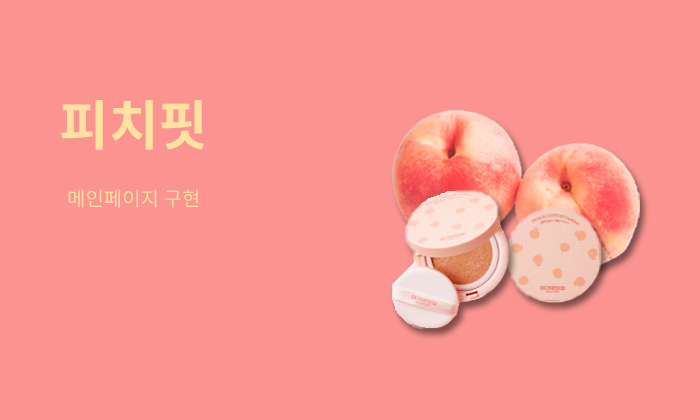
<style>
.page{position:relative;width:700px;height:420px;background:#fb9490}
.page>*{position:absolute;margin:0}
.t1{font:54px "NotoSansKR-Bold";color:#ffe1a1}
.t2{font:20px "NotoSansKR-Regular";color:#ffe1a1}
</style>
<div class="page">
<p class="t1" style="left:61px;top:100px;width:144px;height:50px">피치핏</p>
<p class="t2" style="left:68px;top:189px;width:131px;height:19px">메인페이지 구현</p>
</div>
